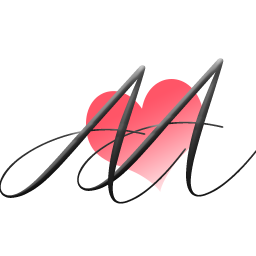
<style>
.page{position:relative;width:256px;height:256px;background:#ffffff}
.page>*{position:absolute;margin:0}
.t1{font:120px "clover";letter-spacing:-0.01em;color:#ffffff}
</style>
<div class="page">
<p class="t1" style="left:0px;top:65px;width:186px;height:139px">A</p>
</div>
